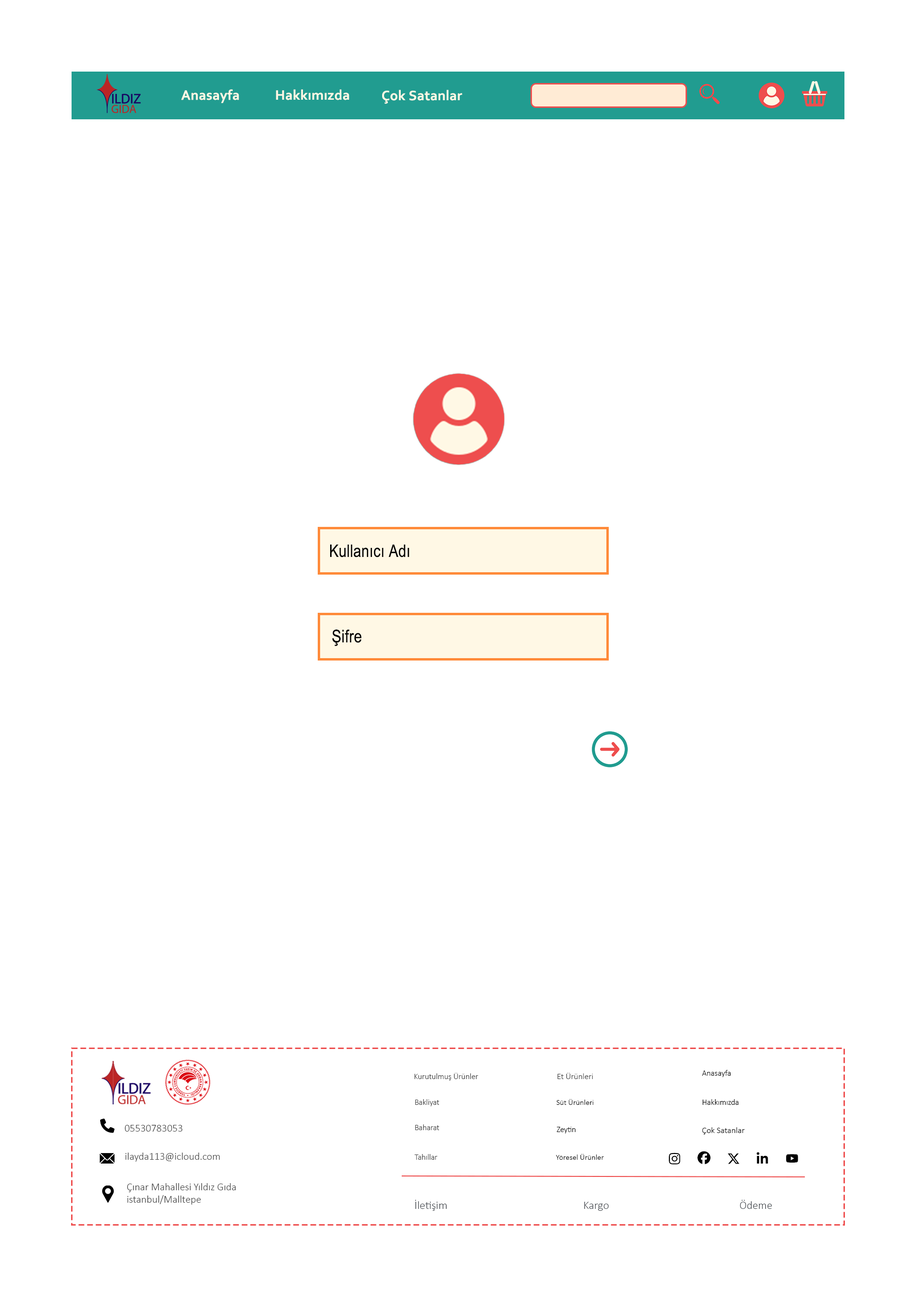
<style>
.page{position:relative;width:916px;height:1301px;background:#ffffff}
.page>*{position:absolute;margin:0}
.t1{font:14.3px "Corbel-Bold";letter-spacing:0.01em;color:#fff8e5}
.t2{font:17.2px "ArialNarrow";letter-spacing:0.01em;color:#000000}
.t3{font:17.5px "ArialNarrow";letter-spacing:0.01em;color:#000000}
.t4{font:8.1px "Calibri-Light";color:#414141}
.t5{font:8.4px "Calibri-Light";color:#414141}
.t6{font:8.1px "Calibri-Light";color:#000000}
.t7{font:8px "Calibri-Light";color:#414141}
.t8{font:7.8px "Calibri-Light";color:#000000}
.t9{font:10.5px "Calibri-Light";color:#414141}
.t10{font:8px "Calibri-Light";letter-spacing:-0.005em;color:#000000}
.t11{font:8.6px "Calibri-Light";color:#000000}
.t12{font:11.5px "Calibri-Light";color:#43484e}
.t13{font:11.4px "Calibri-Light";color:#43484e}
.t14{font:11.2px "Calibri-Light";color:#43484e}
</style>
<div class="page">
<p class="t1" style="left:181px;top:89px;width:58px;height:14px">Anasayfa</p>
<p class="t1" style="left:276px;top:89px;width:73px;height:11px">Hakkımızda</p>
<p class="t1" style="left:382px;top:90px;width:81px;height:14px">Çok Satanlar</p>
<p class="t2" style="left:330px;top:545px;width:80px;height:13px">Kullanıcı Adı</p>
<p class="t3" style="left:332px;top:630px;width:30px;height:16px">Şifre</p>
<p class="t4" style="left:415px;top:1073px;width:64px;height:8px">Kurutulmuş Ürünler</p>
<p class="t5" style="left:558px;top:1073px;width:35px;height:6px">Et Ürünleri</p>
<p class="t6" style="left:702px;top:1070px;width:29px;height:7px">Anasayfa</p>
<p class="t7" style="left:415px;top:1099px;width:25px;height:7px">Bakliyat</p>
<p class="t8" style="left:557px;top:1099px;width:37px;height:6px">Süt Ürünleri</p>
<p class="t6" style="left:703px;top:1099px;width:36px;height:6px">Hakkımızda</p>
<p class="t9" style="left:125px;top:1125px;width:58px;height:7px">05530783053</p>
<p class="t7" style="left:415px;top:1125px;width:25px;height:5px">Baharat</p>
<p class="t10" style="left:557px;top:1127px;width:19px;height:7px">Zeytin</p>
<p class="t11" style="left:703px;top:1127px;width:42px;height:8px">Çok Satanlar</p>
<p class="t9" style="left:126px;top:1153px;width:94px;height:9px">ilayda113@icloud.com</p>
<p class="t7" style="left:415px;top:1154px;width:23px;height:6px">Tahıllar</p>
<p class="t8" style="left:556px;top:1154px;width:48px;height:6px">Yöresel Ürünler</p>
<p class="t9" style="left:127px;top:1183px;width:109px;height:22px">Çınar Mahallesi Yıldız Gıda istanbul/Malltepe</p>
<p class="t12" style="left:415px;top:1200px;width:32px;height:11px">İletişim</p>
<p class="t13" style="left:584px;top:1202px;width:25px;height:9px">Kargo</p>
<p class="t14" style="left:740px;top:1200px;width:32px;height:9px">Ödeme</p>
</div>
